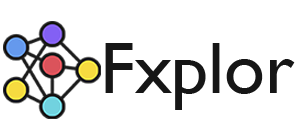
<style>
.page{position:relative;width:300px;height:138px;background:#ffffff}
.page>*{position:absolute;margin:0}
.t1{font:73px "GillSansMT";color:#171717}
</style>
<div class="page">
<p class="t1" style="left:105px;top:43px;width:190px;height:67px">Fxplor</p>
</div>
